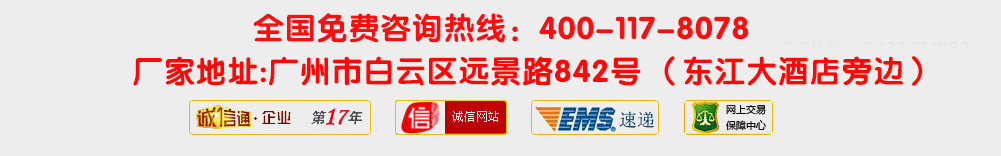
<style>
.page{position:relative;width:1001px;height:156px;background:#ededed}
.page>*{position:absolute;margin:0}
.t1{font:31px "FZY4JW--GB1-0";letter-spacing:0.025em;color:#f90f0f}
.t2{font:31px "FZY4JW--GB1-0";letter-spacing:0.025em;color:#fd0707}
</style>
<div class="page">
<p class="t1" style="left:253px;top:13px;width:496px;height:30px">全国免费咨询热线：400-117-8078</p>
<p class="t2" style="left:133px;top:56px;width:790px;height:30px">厂家地址:广州市白云区远景路842号 （东江大酒店旁边）</p>
</div>
